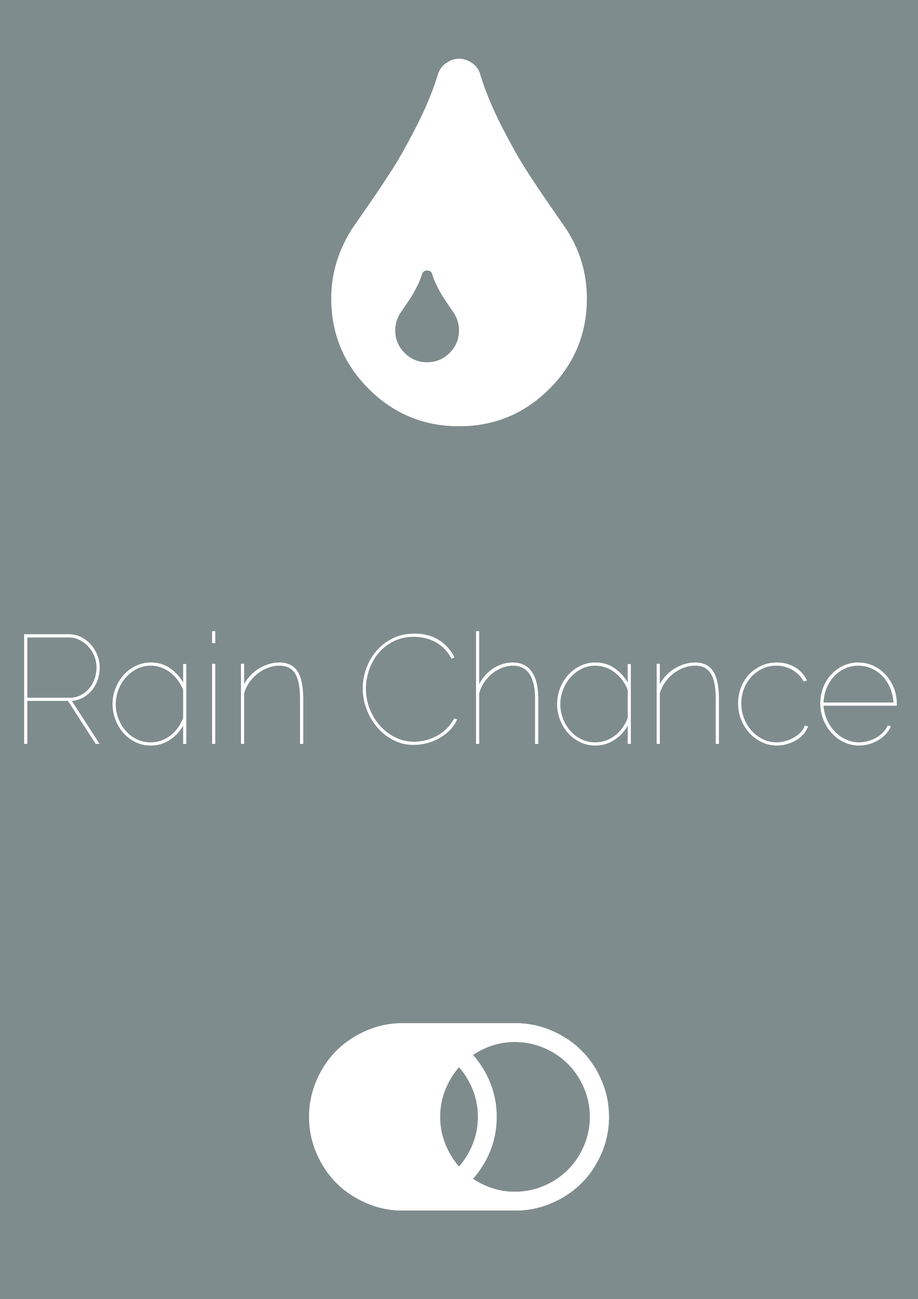
<style>
.page{position:relative;width:918px;height:1299px;background:#7f8c8d}
.page>*{position:absolute;margin:0}
.t1{font:154.3px "Raleway-Thin";color:#ffffff}
</style>
<div class="page">
<p class="t1" style="left:24px;top:631px;width:873px;height:115px">Rain Chance</p>
</div>
